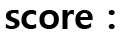
<style>
.page{position:relative;width:120px;height:40px;background:#ffffff}
.page>*{position:absolute;margin:0}
.t1{font:36px "MalgunGothicBold";color:#000000}
</style>
<div class="page">
<p class="t1" style="left:5px;top:10px;width:110px;height:19px">score :</p>
</div>
